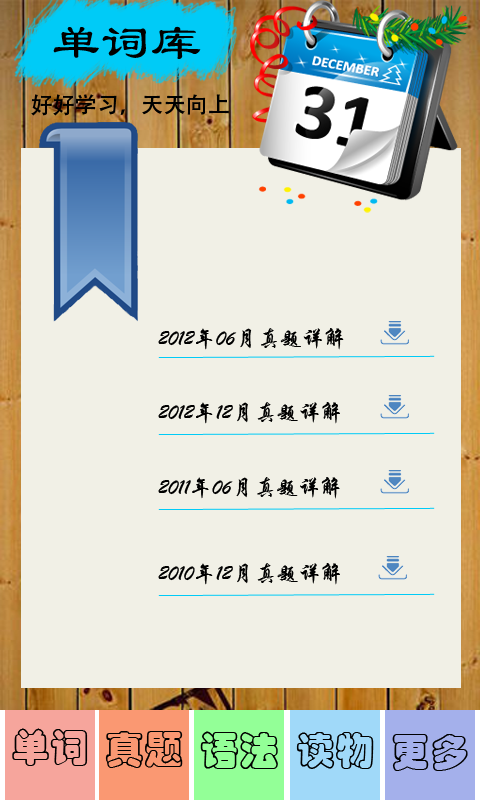
<style>
.page{position:relative;width:480px;height:800px;background:#f1f0e6}
.page>*{position:absolute;margin:0}
.t1{font:50px "LiSu";color:#000000}
.t2{font:22.2px "AdobeHeitiStd-Regular";color:#000000}
.t3{font:22.2px "STXingkai";color:#000000}
</style>
<div class="page">
<p class="t1" style="left:53px;top:26px;width:148px;height:33px">单词库</p>
<p class="t2" style="left:31px;top:94px;width:198px;height:22px">好好学习，天天向上</p>
<p class="t3" style="left:158px;top:328px;width:186px;height:22px">2012年06月真题详解</p>
<p class="t3" style="left:158px;top:402px;width:182px;height:22px">2012年12月真题详解</p>
<p class="t3" style="left:158px;top:477px;width:182px;height:22px">2011年06月真题详解</p>
<p class="t3" style="left:158px;top:563px;width:182px;height:22px">2010年12月真题详解</p>
</div>
